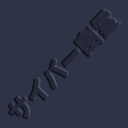
<style>
.page{position:relative;width:128px;height:128px;background:#2f3347}
.page>*{position:absolute;margin:0}
.t1{font:24px "NotoSansJP-Black";color:#252838}
</style>
<div class="page">
<p class="t1" style="left:8px;top:9px;width:112px;height:109px;rotate:-45deg">サイバー幽霊</p>
</div>
